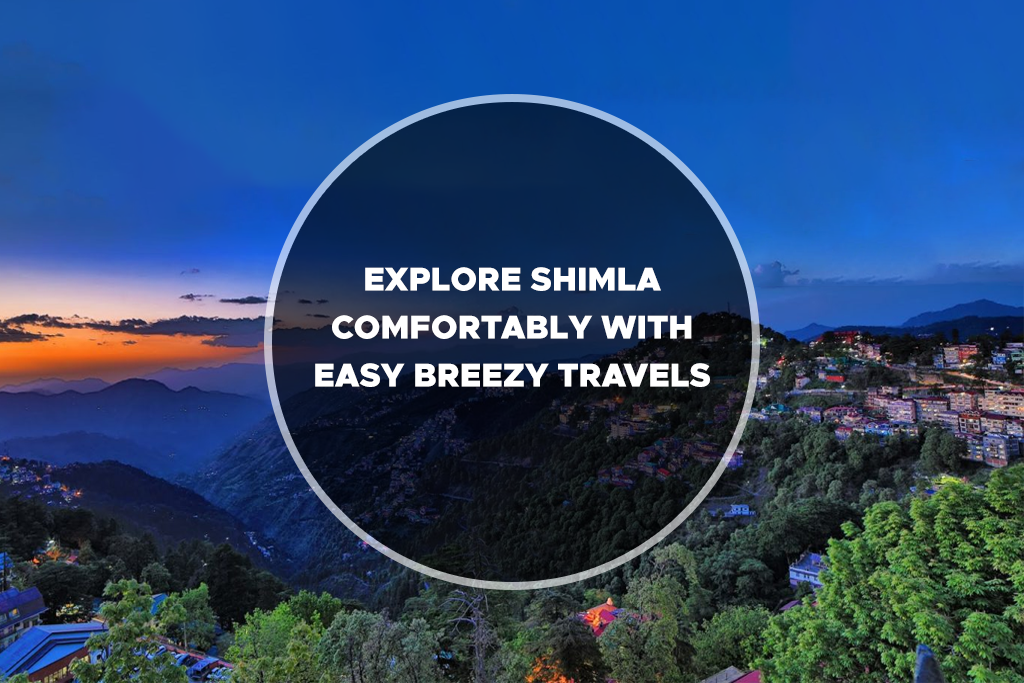
<style>
.page{position:relative;width:1024px;height:683px}
.page>*{position:absolute;margin:0}
.t1{font:33px/48px "Metropolis-Black";color:#ffffff;text-transform:uppercase}
</style>
<div class="page">
<p class="t1" style="left:315px;top:267px;width:395px;height:120px;text-align:center">Explore Shimla Comfortably with Easy Breezy Travels</p>
</div>
